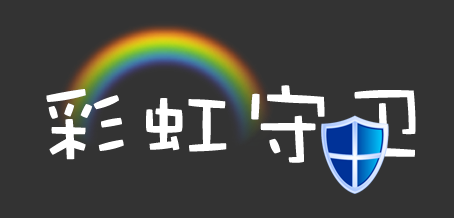
<style>
.page{position:relative;width:454px;height:218px;background:#333333}
.page>*{position:absolute;margin:0}
.t1{font:100px "DFWaWaSC-W5";color:#ffffff}
</style>
<div class="page">
<p class="t1" style="left:46px;top:85px;width:370px;height:78px">彩虹守卫</p>
</div>
